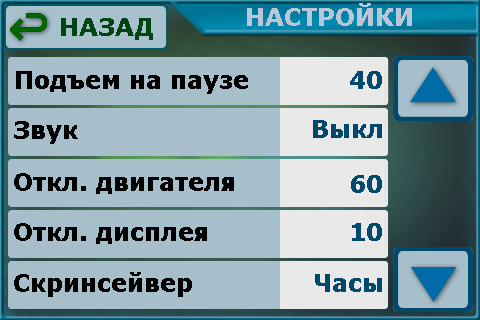
<style>
.page{position:relative;width:480px;height:320px;background:#a6bfcb}
.page>*{position:absolute;margin:0}
.t1{font:24px "Verdana-Bold";color:#bac5d5}
.t2{font:24px "Verdana-Bold";color:#004612}
.t3{font:24px "Verdana-Bold";color:#000000}
.t4{font:24px "Verdana-Bold";color:#00496c}
</style>
<div class="page">
<p class="t1" style="left:247px;top:3px;width:165px;height:23px">НАСТРОЙКИ</p>
<p class="t2" style="left:61px;top:18px;width:92px;height:22px">НАЗАД</p>
<p class="t3" style="left:16px;top:71px;width:232px;height:23px">Подъем на паузе</p>
<p class="t4" style="left:350px;top:71px;width:32px;height:18px">40</p>
<p class="t3" style="left:14px;top:121px;width:64px;height:23px">Звук</p>
<p class="t4" style="left:313px;top:120px;width:69px;height:18px">Выкл</p>
<p class="t3" style="left:14px;top:173px;width:220px;height:21px">Откл. двигателя</p>
<p class="t4" style="left:351px;top:175px;width:31px;height:18px">60</p>
<p class="t3" style="left:14px;top:223px;width:193px;height:21px">Откл. дисплея</p>
<p class="t4" style="left:352px;top:223px;width:30px;height:18px">10</p>
<p class="t3" style="left:14px;top:272px;width:178px;height:25px">Скринсейвер</p>
<p class="t4" style="left:315px;top:274px;width:67px;height:18px">Часы</p>
</div>
